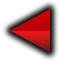
<style>
.page{position:relative;width:60px;height:60px;background:#ffffff}
.page>*{position:absolute;margin:0}
.t1{font:45px "KozGoPr6N-Regular";letter-spacing:-0.08em;scale:1.36 1}
</style>
<div class="page">
<p class="t1" style="left:10px;top:9px;width:40px;height:44px">◀</p>
</div>
